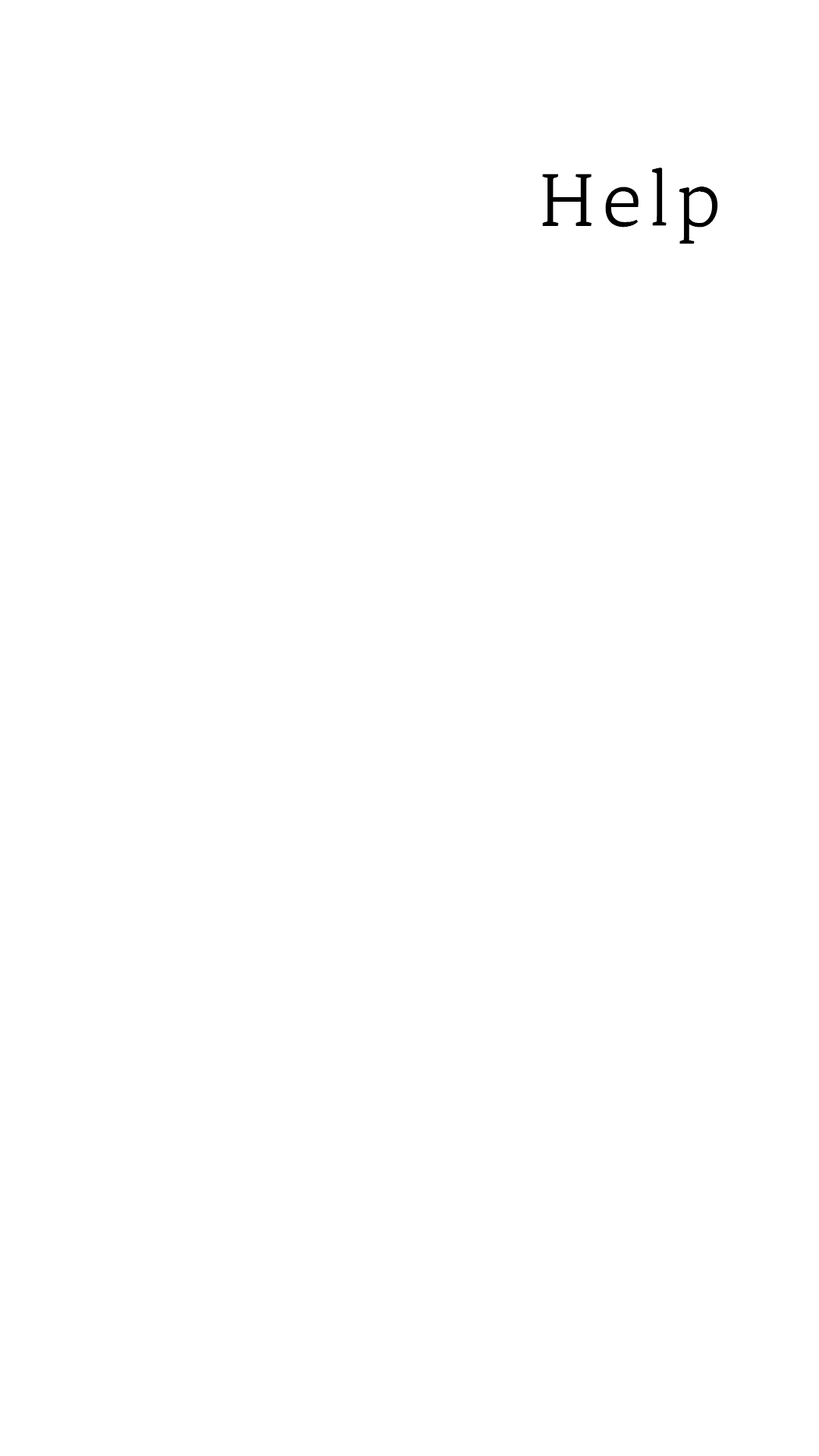
<style>
.page{position:relative;width:819px;height:1456px;background:#ffffff}
.page>*{position:absolute;margin:0}
.t1{font:75.8px "MARUBuriBeta-Regular";letter-spacing:0.1em;color:#000000}
</style>
<div class="page">
<p class="t1" style="left:542px;top:168px;width:176px;height:76px">Help</p>
</div>
